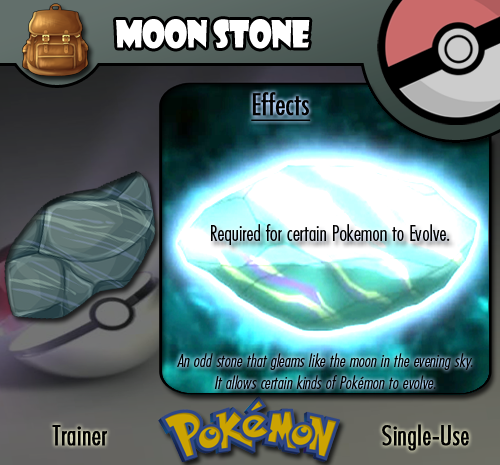
<style>
.page{position:relative;width:500px;height:465px}
.page>*{position:absolute;margin:0}
.t1{font:36.7px "ShowcardGothic-Reg";letter-spacing:-0.025em;color:#ffffff;scale:0.91 1}
.t2{font:18.1px "FuturaCondensedBQ-Light";color:#010101;font-style:italic}
.t3{font:27.8px "FuturaCondensedBQ-Light";color:#010101;font-weight:bold}
</style>
<div class="page">
<p class="t1" style="left:116px;top:19px;width:194px;height:30px">Moon Stone</p>
<p class="t2" style="left:177px;top:353px;width:296px;height:36px;text-align:center">An odd stone that gleams like the moon in the evening sky. It allows certain kinds of Pokémon to evolve.</p>
<p class="t3" style="left:52px;top:425px;width:55px;height:21px">Trainer</p>
<p class="t3" style="left:382px;top:424px;width:87px;height:27px">Single-Use</p>
</div>
